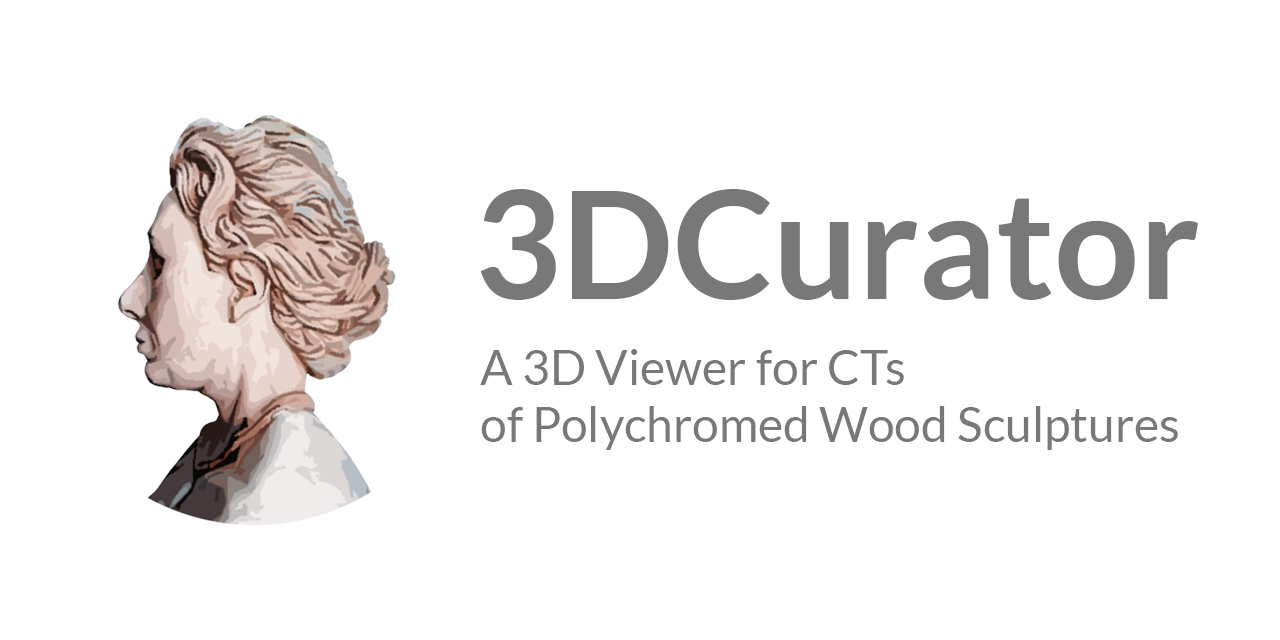
<style>
.page{position:relative;width:1280px;height:640px;background:#ffffff}
.page>*{position:absolute;margin:0}
.t1{font:150px "Lato-Bold";color:#787878}
.t2{font:48px "Lato-Regular";color:#787878}
</style>
<div class="page">
<p class="t1" style="left:480px;top:189px;width:718px;height:111px">3DCurator</p>
<p class="t2" style="left:480px;top:349px;width:698px;height:101px">A 3D Viewer for CTs <br>of Polychromed Wood Sculptures</p>
</div>
